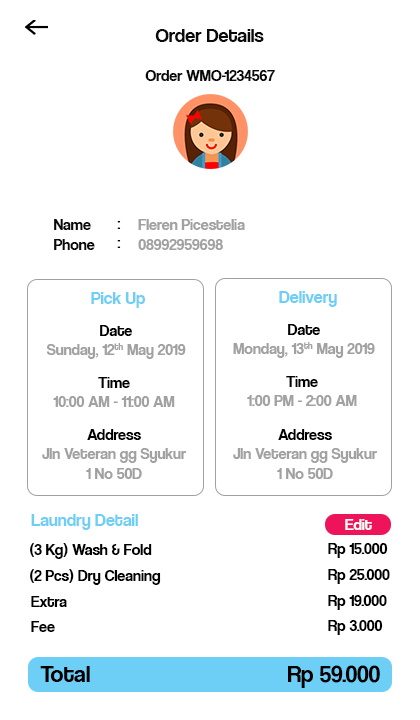
<style>
.page{position:relative;width:420px;height:720px;background:#ffffff}
.page>*{position:absolute;margin:0}
.t1{font:20px "CoolveticaRg-Regular";color:#0b0a0a}
.t2{font:16px "CoolveticaRg-Regular";color:#0b0a0a}
.t3{font:16px "CoolveticaRg-Regular";color:#090808}
.t4{font:16px "CoolveticaRg-Regular";color:#a1a1a1}
.t5{font:18px "CoolveticaRg-Regular";color:#6dcff6}
.t6{font:16px "CoolveticaRg-Regular";color:#000000}
.t7{font:16px "CoolveticaRg-Regular";color:#ffffff}
.t8{font:24px "CoolveticaRg-Regular";color:#000000}
</style>
<div class="page">
<p class="t1" style="left:155px;top:29px;width:109px;height:13px">Order Details</p>
<p class="t2" style="left:145px;top:70px;width:130px;height:11px">Order WMO-1234567</p>
<p class="t2" style="left:54px;top:219px;width:41px;height:31px">Name<br>Phone</p>
<p class="t3" style="left:117px;top:221px;width:4px;height:27px">:<br>:</p>
<p class="t4" style="left:138px;top:219px;width:107px;height:31px">Fleren Picestelia<br>08992959698</p>
<p class="t5" style="left:91px;top:292px;width:54px;height:16px">Pick Up</p>
<p class="t5" style="left:279px;top:291px;width:58px;height:16px">Delivery</p>
<p class="t4" style="left:46px;top:325px;width:140px;height:34px;text-align:center"><span class="t6">Date<br></span>Sunday, 12th May 2019</p>
<p class="t4" style="left:233px;top:324px;width:142px;height:34px;text-align:center"><span class="t6">Date<br></span>Monday, 13th May 2019</p>
<p class="t4" style="left:53px;top:377px;width:122px;height:30px;text-align:center"><span class="t6">Time<br></span>10:00 AM - 11:00 AM</p>
<p class="t4" style="left:247px;top:376px;width:110px;height:30px;text-align:center"><span class="t6">Time<br></span>1:00 PM - 2:00 AM</p>
<p class="t4" style="left:42px;top:429px;width:145px;height:50px;text-align:center"><span class="t6">Address<br></span>Jln Veteran gg Syukur<br>1 No 50D</p>
<p class="t4" style="left:233px;top:429px;width:145px;height:50px;text-align:center"><span class="t6">Address<br></span>Jln Veteran gg Syukur<br>1 No 50D</p>
<p class="t5" style="left:31px;top:514px;width:107px;height:16px">Laundry Detail</p>
<p class="t7" style="left:345px;top:519px;width:27px;height:11px">Edit</p>
<p class="t6" style="left:30px;top:543px;width:122px;height:16px">(3 Kg) Wash &amp; Fold</p>
<p class="t6" style="left:328px;top:543px;width:60px;height:15px">Rp 15.000</p>
<p class="t6" style="left:30px;top:569px;width:131px;height:16px">(2 Pcs) Dry Cleaning</p>
<p class="t6" style="left:328px;top:569px;width:62px;height:15px">Rp 25.000</p>
<p class="t6" style="left:31px;top:596px;width:36px;height:11px">Extra</p>
<p class="t6" style="left:328px;top:595px;width:59px;height:15px">Rp 19.000</p>
<p class="t6" style="left:31px;top:621px;width:24px;height:11px">Fee</p>
<p class="t6" style="left:328px;top:620px;width:55px;height:15px">Rp 3.000</p>
<p class="t8" style="left:288px;top:665px;width:92px;height:23px">Rp 59.000</p>
<p class="t8" style="left:40px;top:666px;width:50px;height:16px">Total</p>
</div>
